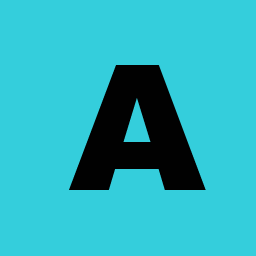
<style>
.page{position:relative;width:256px;height:256px;background:#34cedc}
.page>*{position:absolute;margin:0}
.t1{font:174.7px "Arial-Black";color:#010101}
</style>
<div class="page">
<p class="t1" style="left:69px;top:65px;width:137px;height:125px">A</p>
</div>
